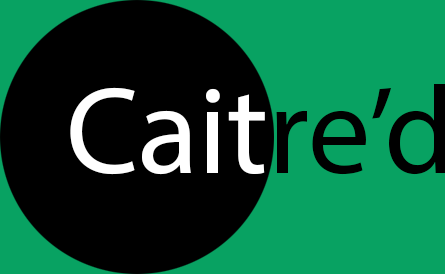
<style>
.page{position:relative;width:445px;height:274px;background:#000000}
.page>*{position:absolute;margin:0}
.t1{font:125px "MyriadPro-Regular";color:#ffffff}
.t2{font:125px "MyriadPro-Regular";color:#000000}
</style>
<div class="page">
<p class="t1" style="left:70px;top:84px;width:376px;height:91px">Cait<span class="t2">re’d</span></p>
</div>
